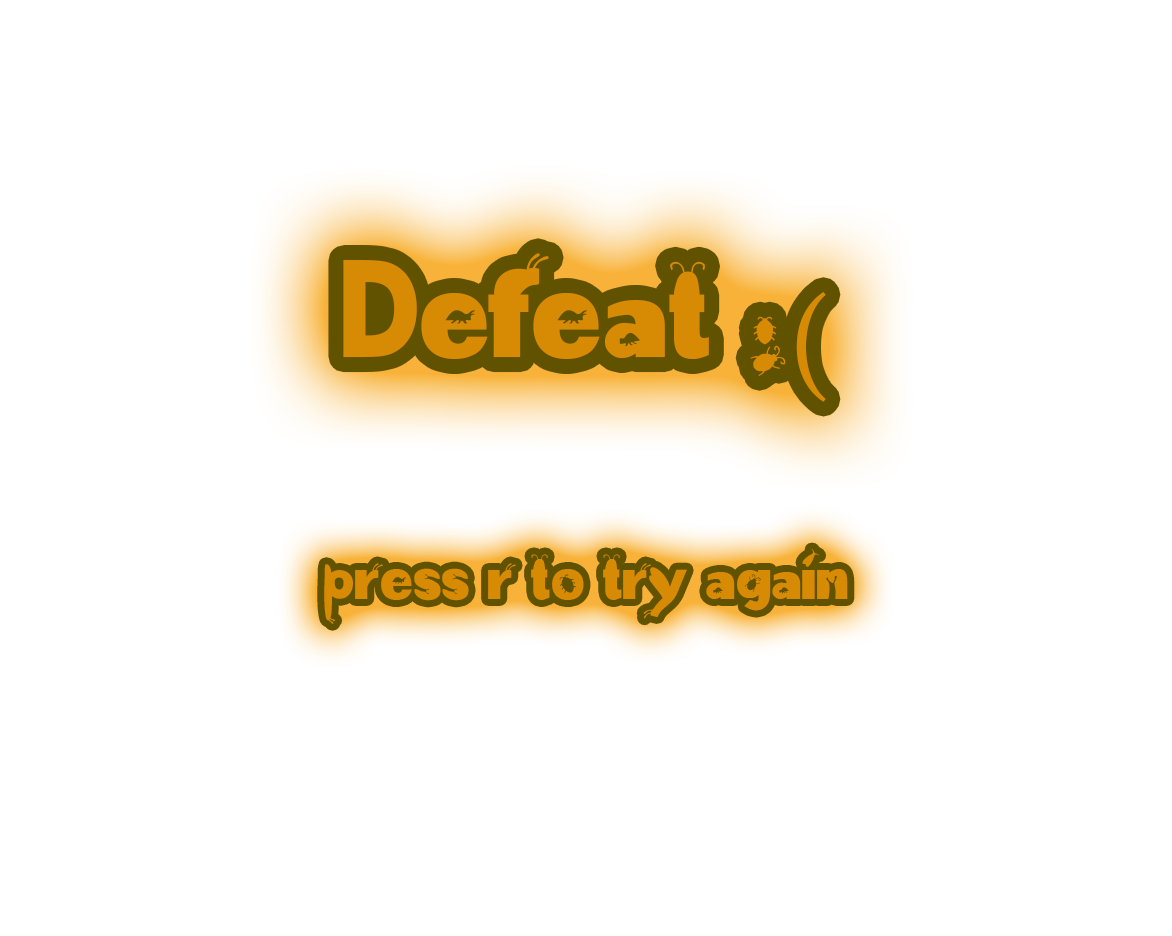
<style>
.page{position:relative;width:1172px;height:936px;background:#ffffff}
.page>*{position:absolute;margin:0}
.t1{font:125px "abug'slife-Regular";color:#d78a04}
.t2{font:125px "MinionPro-Regular";color:#d78a04}
.t3{font:58.3px "abug'slife-Regular";color:#d78a04}
</style>
<div class="page">
<p class="t1" style="left:343px;top:253px;width:483px;height:149px">Defeat :<span class="t2">(</span></p>
<p class="t3" style="left:324px;top:549px;width:524px;height:75px">press r to try again</p>
</div>
